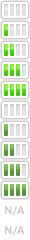
<style>
.page{position:relative;width:30px;height:240px;background:#ffffff}
.page>*{position:absolute;margin:0}
.t1{font:11px "HelveticaNeue-Bold";letter-spacing:0.02em;color:#cccccc}
.t2{font:12px "HelveticaNeue-Bold";color:#cccccc}
.t3{font:11px "HelveticaNeue-Bold";color:#cccccc}
</style>
<div class="page">
<p class="t1" style="left:5px;top:206px;width:20px;height:10px">N<span class="t2">/</span><span class="t3">A</span></p>
<p class="t1" style="left:5px;top:226px;width:20px;height:10px">N<span class="t2">/</span><span class="t3">A</span></p>
</div>
